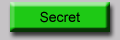
<style>
.page{position:relative;width:120px;height:40px;background:#1ec915}
.page>*{position:absolute;margin:0}
.t1{font:14px "ArialMT";color:#000000}
</style>
<div class="page">
<p class="t1" style="left:40px;top:11px;width:40px;height:12px">Secret</p>
</div>
